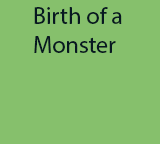
<style>
.page{position:relative;width:160px;height:144px;background:#86c06c}
.page>*{position:absolute;margin:0}
.t1{font:24px "MyriadPro-Regular";color:#071821}
</style>
<div class="page">
<p class="t1" style="left:34px;top:7px;width:88px;height:46px">Birth of a <br>Monster</p>
</div>
